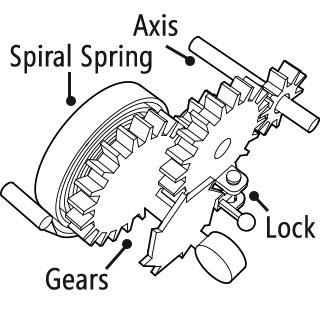
<style>
.page{position:relative;width:320px;height:320px;background:#ffffff}
.page>*{position:absolute;margin:0}
.t1{font:30px "SegoeCondensed";color:#171717;font-weight:bold}
</style>
<div class="page">
<p class="t1" style="left:133px;top:14px;width:45px;height:22px">Axis</p>
<p class="t1" style="left:10px;top:43px;width:142px;height:31px">Spiral Spring</p>
<p class="t1" style="left:267px;top:215px;width:49px;height:23px">Lock</p>
<p class="t1" style="left:46px;top:267px;width:62px;height:23px">Gears</p>
</div>
